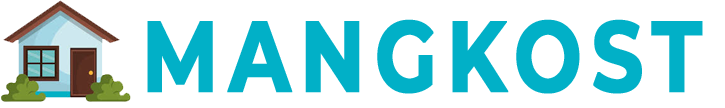
<style>
.page{position:relative;width:725px;height:108px;background:#ffffff}
.page>*{position:absolute;margin:0}
.t1{font:100px "Montserrat-Bold";letter-spacing:0.1em;color:#01b0c7;text-transform:uppercase;font-weight:bold;scale:0.8 1}
</style>
<div class="page">
<p class="t1" style="left:147px;top:19px;width:556px;height:75px">MANGKOST</p>
</div>
